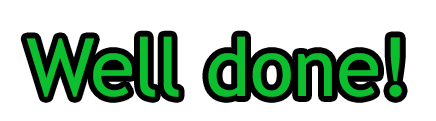
<style>
.page{position:relative;width:436px;height:121px;background:#ffffff}
.page>*{position:absolute;margin:0}
.t1{font:80px "TrebuchetMS";color:#0dbe2f}
</style>
<div class="page">
<p class="t1" style="left:26px;top:36px;width:376px;height:61px">Well done!</p>
</div>
